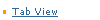
<style>
.page{position:relative;width:100px;height:20px;background:#ffffff}
.page>*{position:absolute;margin:0}
.t1{font:10px "Verdana";color:#336699;text-decoration:underline;scale:0.85 1}
</style>
<div class="page">
<p class="t1" style="left:12px;top:6px;width:46px;height:11px">Tab View</p>
</div>
